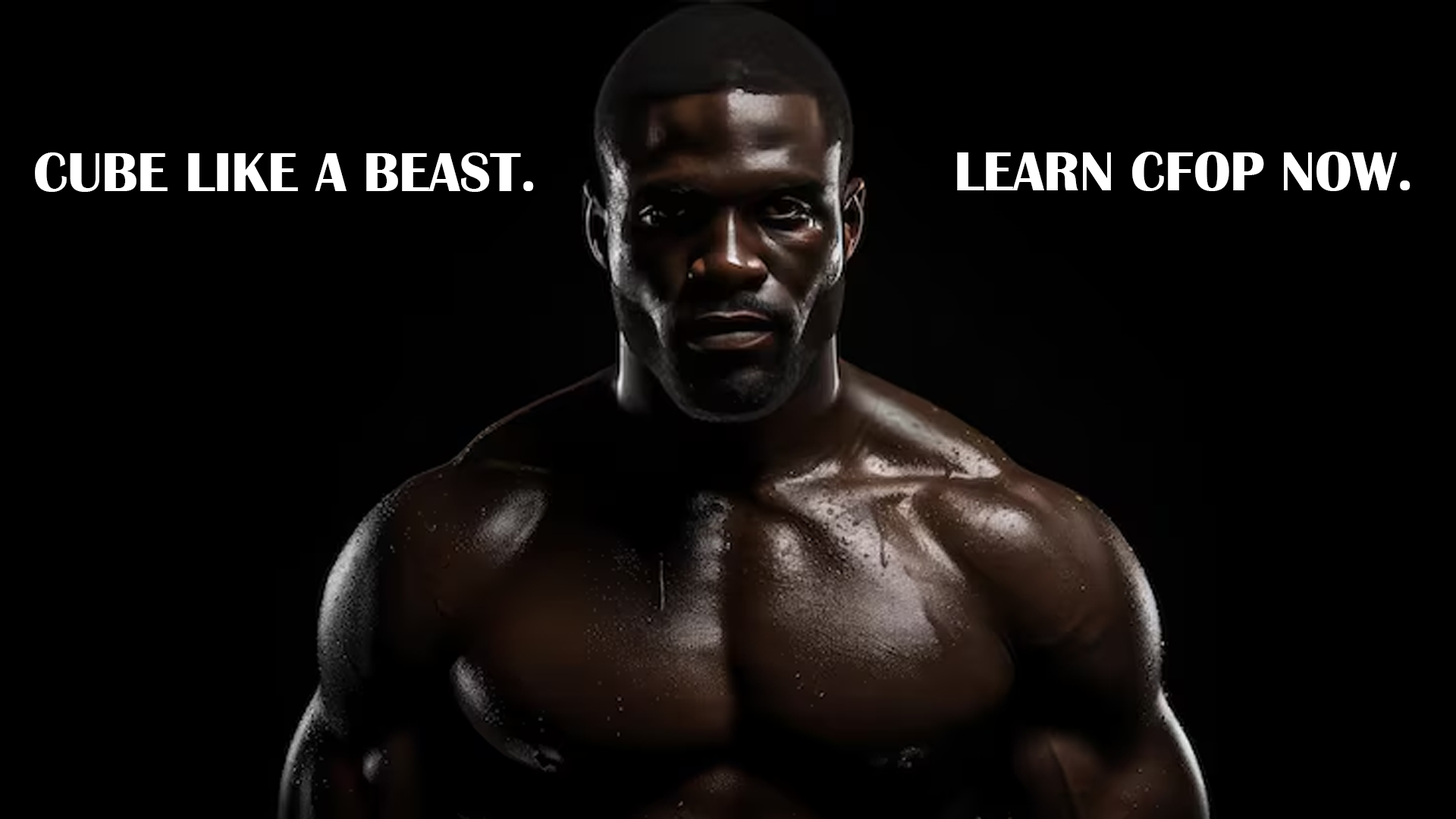
<style>
.page{position:relative;width:1456px;height:819px;background:#000000}
.page>*{position:absolute;margin:0}
.t1{font:56.9px "BritannicBold";color:#ffffff}
</style>
<div class="page">
<p class="t1" style="left:35px;top:152px;width:499px;height:40px">CUBE LIKE A BEAST.</p>
<p class="t1" style="left:957px;top:152px;width:453px;height:39px">LEARN CFOP NOW.</p>
</div>
